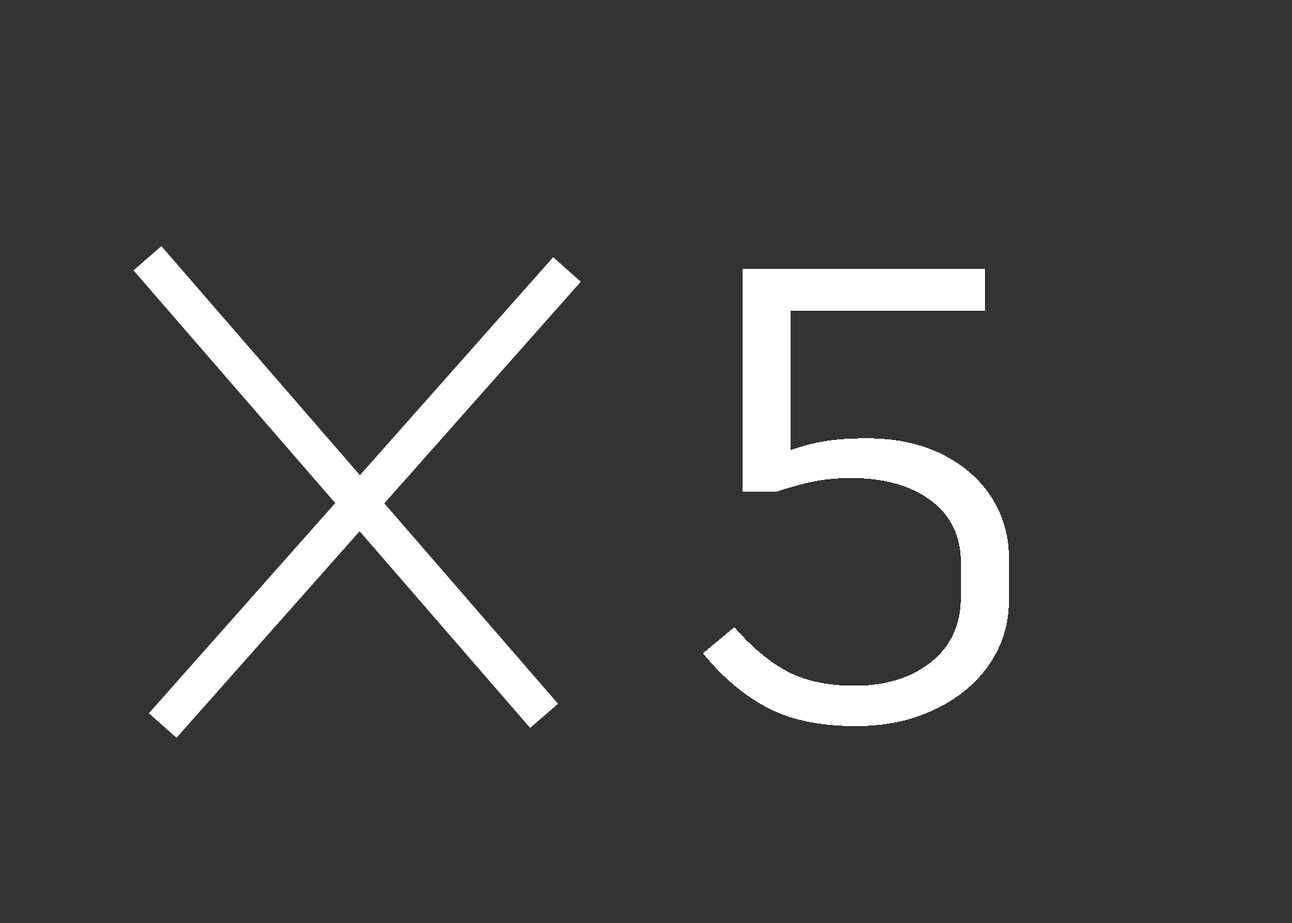
<style>
.page{position:relative;width:1292px;height:923px;background:#333333}
.page>*{position:absolute;margin:0}
.t1{font:640.9px "ArtifaktElement-Regular";color:#ffffff}
</style>
<div class="page">
<p class="t1" style="left:703px;top:269px;width:306px;height:457px">5</p>
</div>
